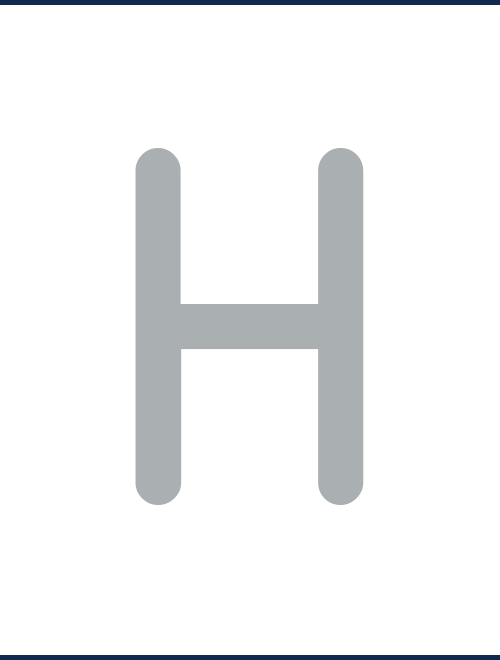
<style>
.page{position:relative;width:500px;height:660px;background:#ffffff}
.page>*{position:absolute;margin:0}
.t1{font:550px "OCRAExtended";color:#aaafb2}
</style>
<div class="page">
<p class="t1" style="left:135px;top:148px;width:229px;height:357px">H</p>
</div>
